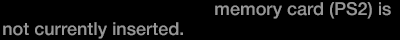
<style>
.page{position:relative;width:400px;height:40px;background:#000000}
.page>*{position:absolute;margin:0}
.t1{font:18px/20px "HelveticaNeue-Medium"}
.t2{font:18px/20px "HelveticaNeue-Bold"}
</style>
<div class="page">
<p class="t1" style="left:3px;top:2px;width:388px;height:37px"><span class="t2">MEMORY CARD SLOT 1</span> memory card (PS2) is<br>not currently inserted.</p>
</div>
